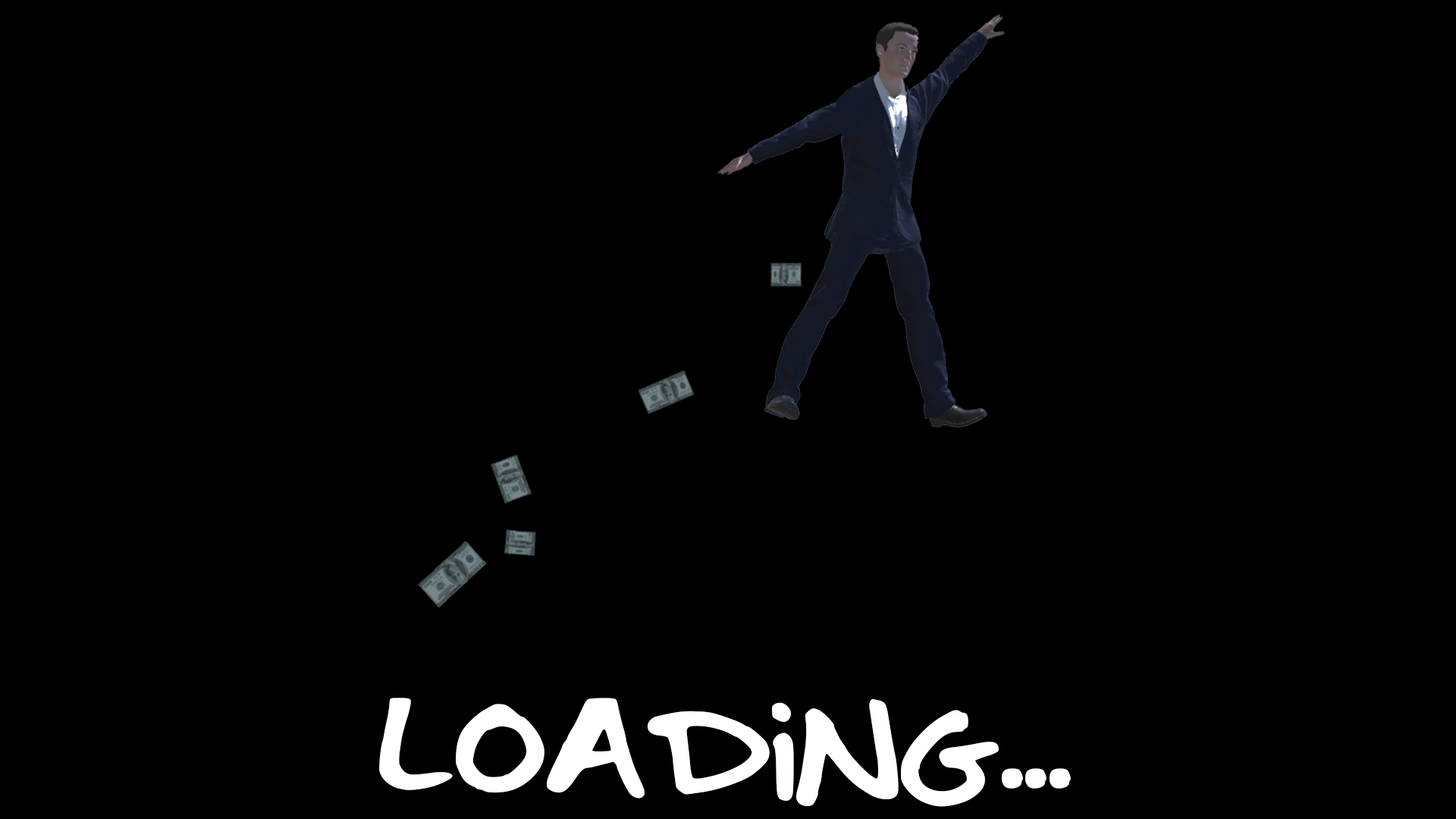
<style>
.page{position:relative;width:1456px;height:819px;background:#000000}
.page>*{position:absolute;margin:0}
.t1{font:153.3px "emilyyyyyy";color:#ffffff}
</style>
<div class="page">
<p class="t1" style="left:379px;top:698px;width:692px;height:109px">LOADING...</p>
</div>
